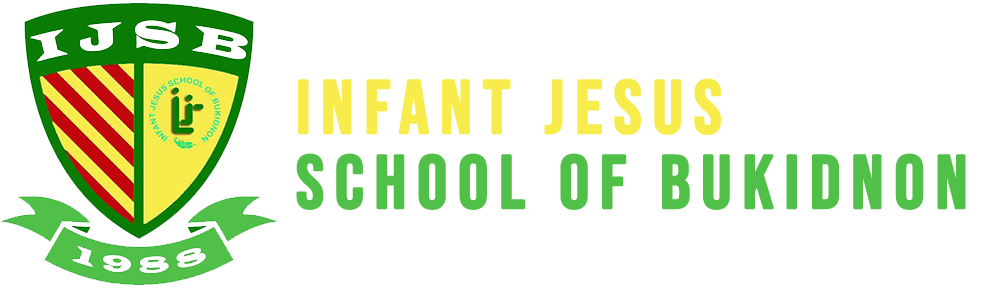
<style>
.page{position:relative;width:1006px;height:288px;background:#ffffff}
.page>*{position:absolute;margin:0}
.t1{font:75px/37.5px "BebasNeue-Regular";letter-spacing:0.12em;color:#51c048;font-weight:bold}
.t2{font:75px/37.5px "BebasNeue-Regular";letter-spacing:0.12em;color:#f8ec4c;font-weight:bold}
.t3{font:75px/37.5px "BebasNeue-Regular";letter-spacing:0.12em;color:#28a745;font-weight:bold}
</style>
<div class="page">
<p class="t1" style="left:296px;top:78px;width:670px;height:132px"><span class="t2">INFANT JESUS<br></span><span class="t3"><br></span>sCHOOL OF BUKIDNON</p>
</div>
